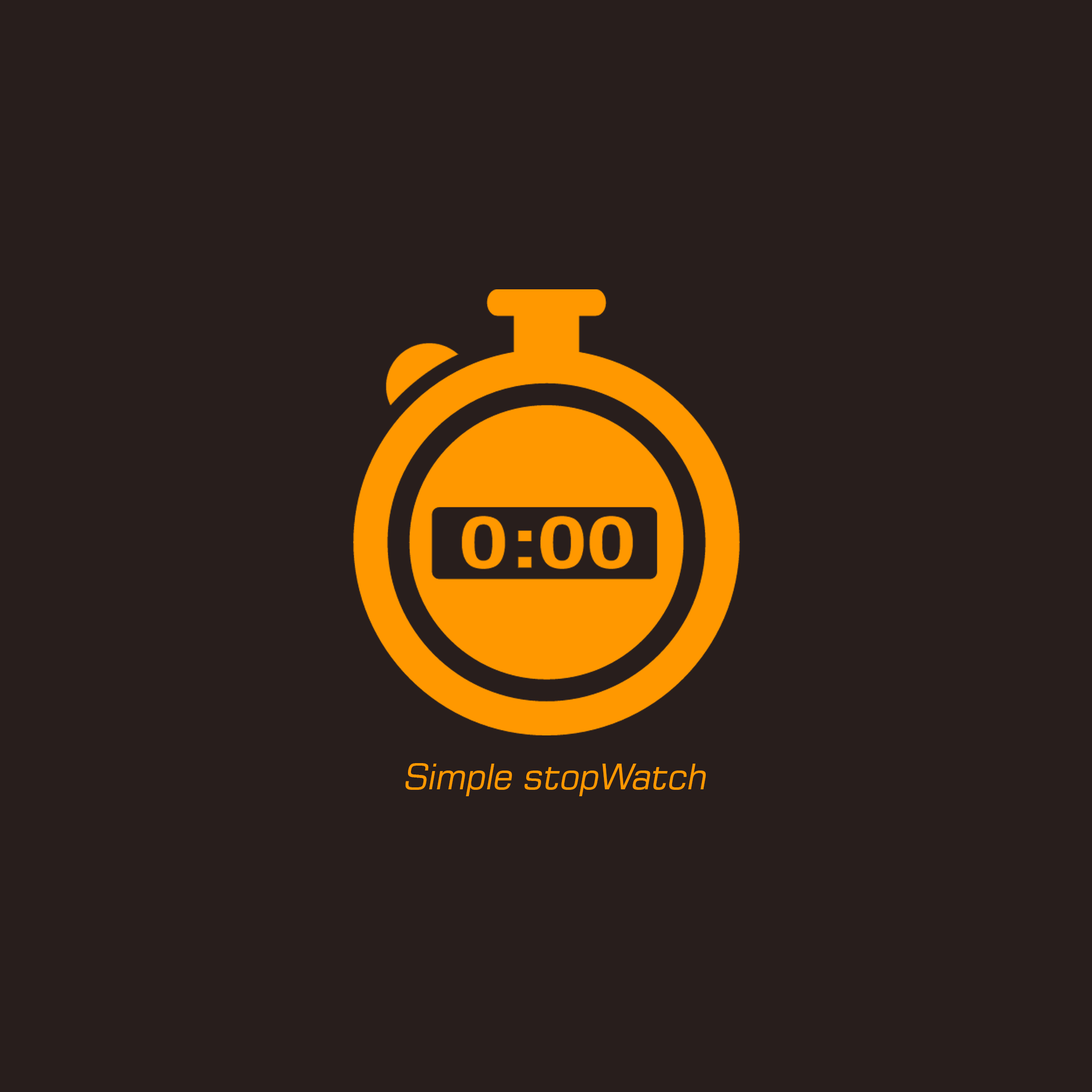
<style>
.page{position:relative;width:1092px;height:1092px;background:#281e1c}
.page>*{position:absolute;margin:0}
.t1{font:35.6px "Square721BT-Roman";letter-spacing:-0.025em;color:#ff9800;font-style:italic}
</style>
<div class="page">
<p class="t1" style="left:406px;top:763px;width:300px;height:33px">Simple stopWatch</p>
</div>
